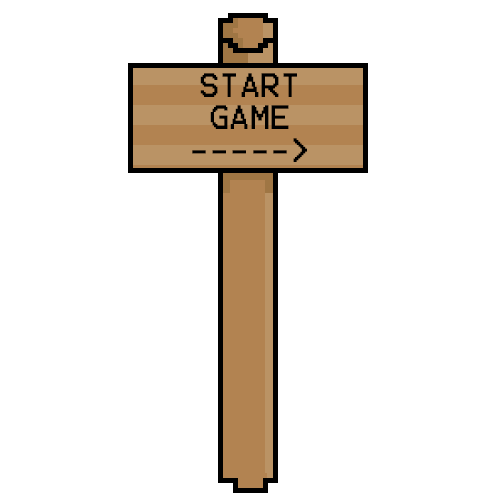
<style>
.page{position:relative;width:500px;height:500px;background:#ffffff}
.page>*{position:absolute;margin:0}
.t1{font:27px "Terminal";color:#000000}
</style>
<div class="page">
<p class="t1" style="left:192px;top:73px;width:115px;height:89px;text-align:center">START<br>GAME<br>-----&gt;</p>
</div>
